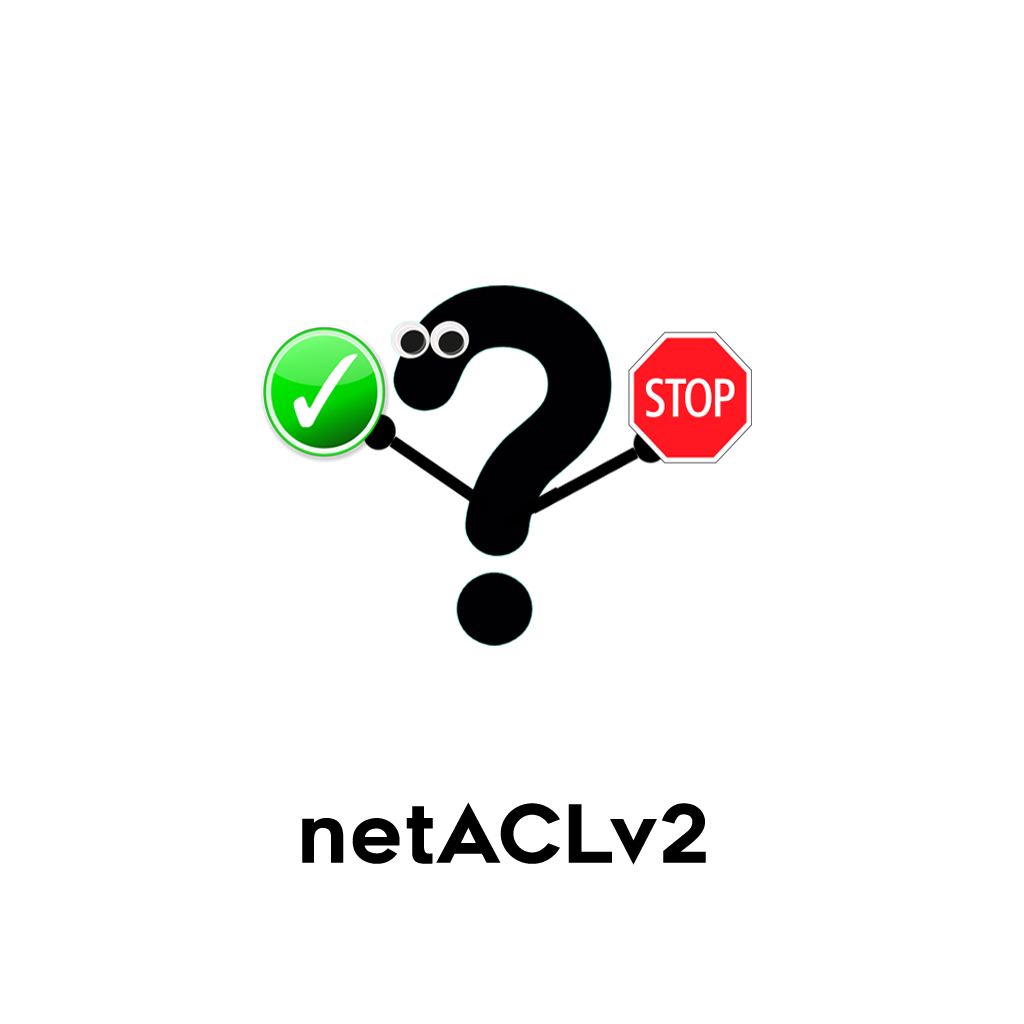
<style>
.page{position:relative;width:1024px;height:1024px;background:#ffffff}
.page>*{position:absolute;margin:0}
.t1{font:80px "Renogare-Regular";color:#000000}
</style>
<div class="page">
<p class="t1" style="left:302px;top:802px;width:404px;height:63px">netACLv2</p>
</div>
